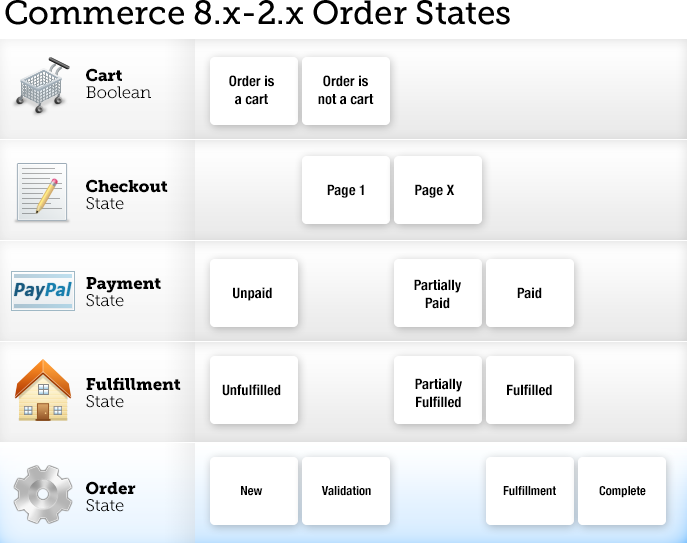
<style>
.page{position:relative;width:687px;height:543px;background:#ffffff}
.page>*{position:absolute;margin:0}
.t1{font:33.3px "MuseoSlab-500";color:#000000}
.t2{font:16.7px/16.7px "MuseoSlab-300";color:#000000}
.t3{font:16.7px/16.7px "MuseoSlab-900";color:#000000}
.t4{font:14.6px "HelveticaNeue-CondensedBold";color:#000000}
.t5{font:12.5px "HelveticaNeue-CondensedBold";color:#000000}
</style>
<div class="page">
<p class="t1" style="left:5px;top:0px;width:505px;height:25px">Commerce 8.x-2.x Order States</p>
<p class="t2" style="left:86px;top:68px;width:65px;height:31px"><span class="t3">Cart<br></span>Boolean</p>
<p class="t4" style="left:229px;top:75px;width:45px;height:30px;text-align:center">Order is<br>a cart</p>
<p class="t4" style="left:318px;top:75px;width:56px;height:30px;text-align:center">Order is<br>not a cart</p>
<p class="t3" style="left:86px;top:179px;width:82px;height:31px">Checkout<br><span class="t2">State</span></p>
<p class="t4" style="left:327px;top:184px;width:37px;height:14px">Page 1</p>
<p class="t4" style="left:415px;top:184px;width:40px;height:14px">Page X</p>
<p class="t3" style="left:86px;top:277px;width:75px;height:30px">Payment<br><span class="t2">State</span></p>
<p class="t4" style="left:414px;top:279px;width:47px;height:30px;text-align:center">Partially Paid</p>
<p class="t4" style="left:233px;top:287px;width:39px;height:14px">Unpaid</p>
<p class="t4" style="left:517px;top:287px;width:25px;height:12px">Paid</p>
<p class="t3" style="left:86px;top:377px;width:95px;height:31px">Fulfillment<br><span class="t2">State</span></p>
<p class="t4" style="left:222px;top:384px;width:59px;height:12px">Unfulfilled</p>
<p class="t4" style="left:415px;top:378px;width:47px;height:30px;text-align:center">Partially Fulfilled</p>
<p class="t4" style="left:507px;top:384px;width:45px;height:12px">Fulfilled</p>
<p class="t3" style="left:86px;top:481px;width:50px;height:31px">Order<br><span class="t2">State</span></p>
<p class="t5" style="left:241px;top:486px;width:22px;height:10px">New</p>
<p class="t5" style="left:321px;top:486px;width:50px;height:10px">Validation</p>
<p class="t5" style="left:503px;top:486px;width:53px;height:10px">Fulfillment</p>
<p class="t5" style="left:599px;top:486px;width:47px;height:12px">Complete</p>
</div>
